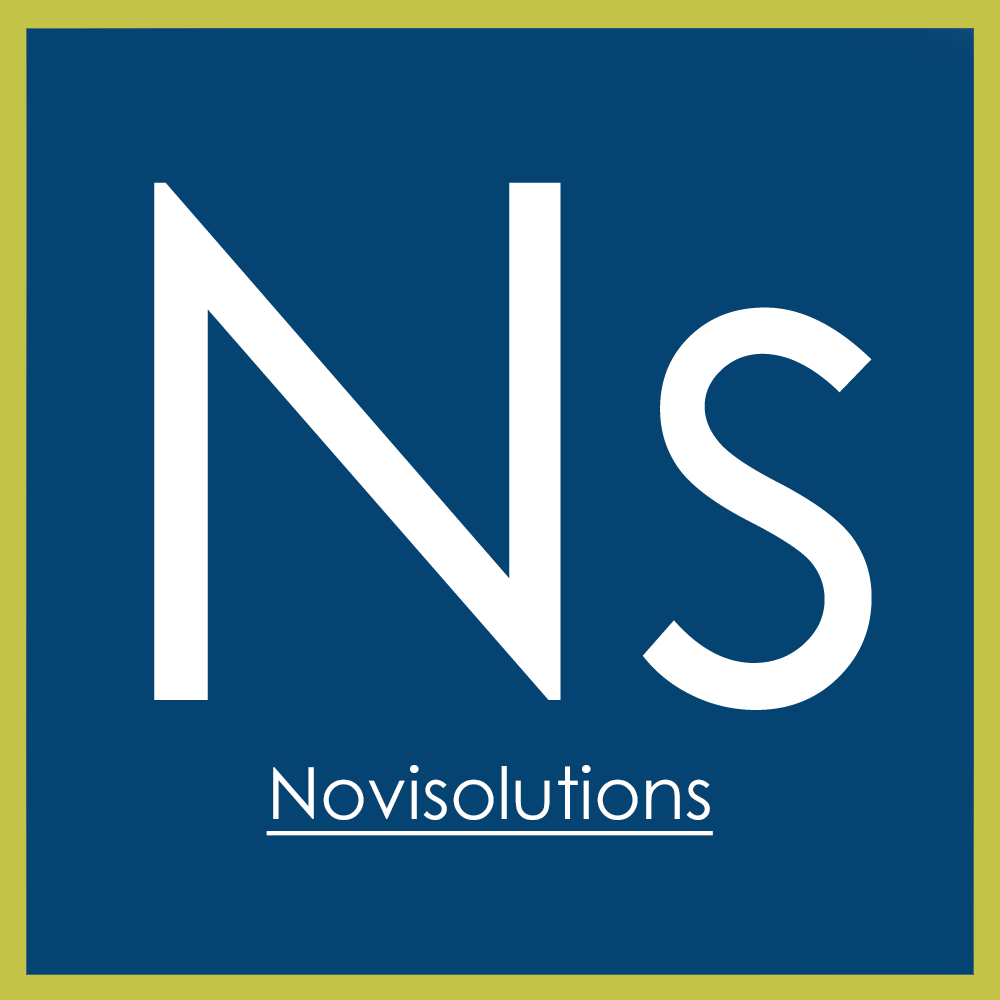
<style>
.page{position:relative;width:1000px;height:1000px;background:#054372}
.page>*{position:absolute;margin:0}
.t1{font:72px "CenturyGothic";color:#ffffff;text-decoration:underline}
</style>
<div class="page">
<p class="t1" style="left:266px;top:765px;width:447px;height:71px">Novisolutions</p>
</div>
